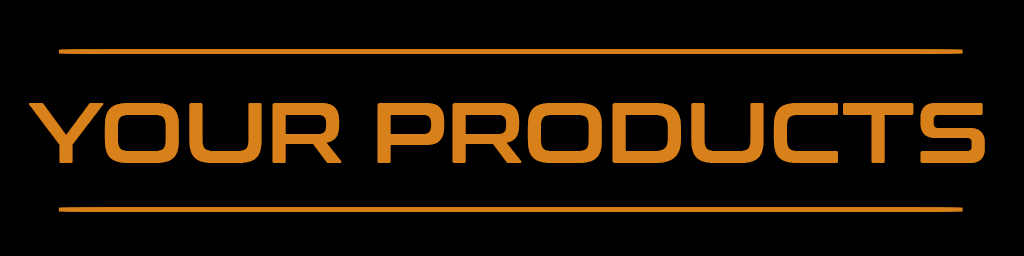
<style>
.page{position:relative;width:1024px;height:256px;background:#000000}
.page>*{position:absolute;margin:0}
.t1{font:41px "ConthraxSb-Regular";color:#d88019;scale:65.38 1}
.t2{font:85.1px "ConthraxSb-Regular";color:#d88019}
</style>
<div class="page">
<p class="t1" style="left:58px;top:49px;width:905px;height:5px">-</p>
<p class="t2" style="left:29px;top:103px;width:956px;height:60px">YOUR PRODUCTS</p>
<p class="t1" style="left:58px;top:207px;width:905px;height:5px">-</p>
</div>
